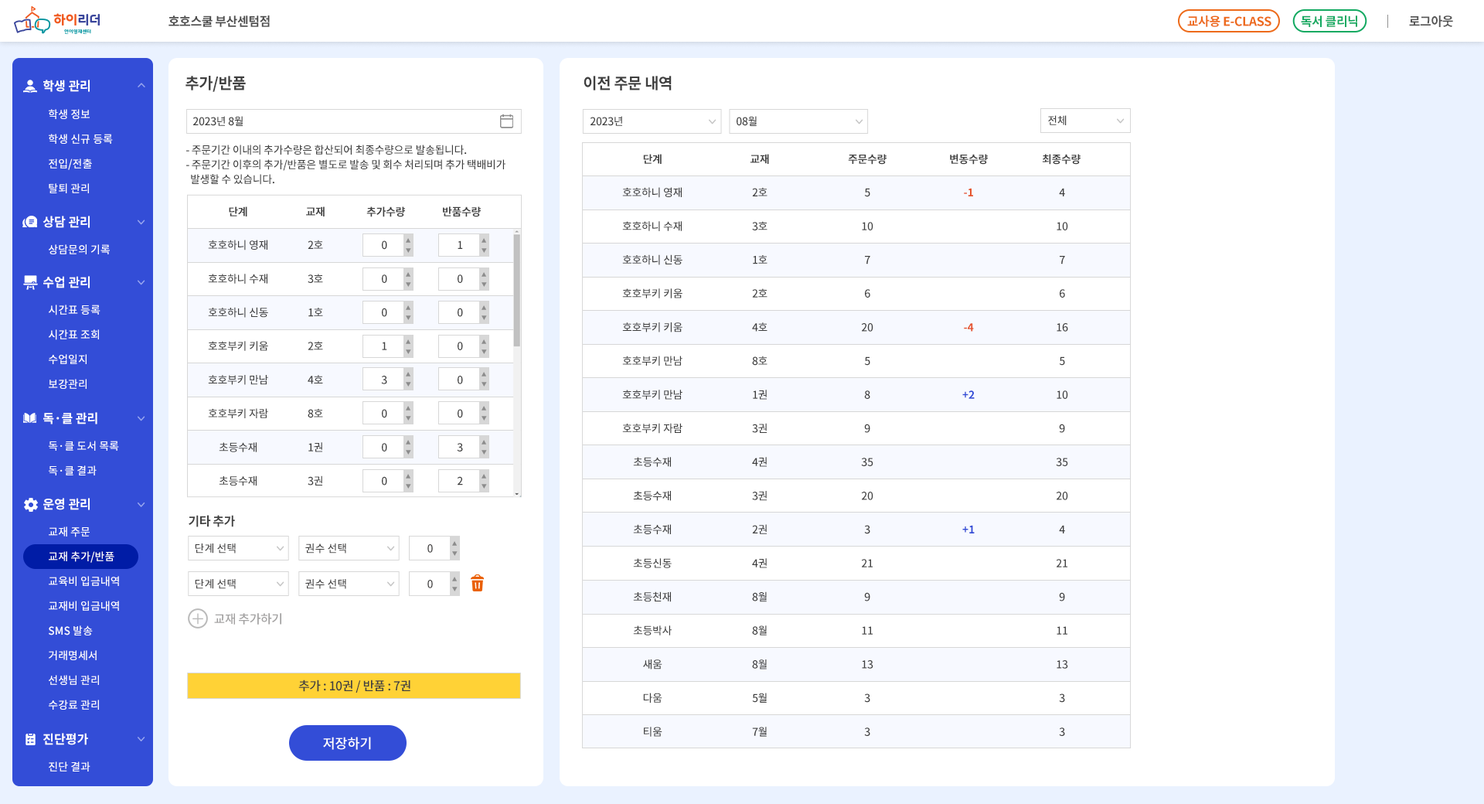
<style>
.page{position:relative;width:1484px;height:804px;background:#ffffff}
.page>*{position:absolute;margin:0}
.t1{font:12.4px "NotoSansCJKkr-Bold";letter-spacing:-0.025em;color:#4d4d4d}
.t2{font:12.4px "NotoSansCJKkr-Bold";letter-spacing:-0.025em;color:#ed6a1a}
.t3{font:12.4px "NotoSansCJKkr-Bold";letter-spacing:-0.025em;color:#13a961}
.t4{font:12.4px "NotoSansCJKkr-Bold";letter-spacing:-0.025em;color:#565656}
.t5{font:15.5px "NotoSansCJKkr-Bold";letter-spacing:-0.025em;color:#404040}
.t6{font:12.4px "NotoSansCJKkr-Bold";color:#ffffff}
.t7{font:10.8px/24.7px "NotoSansCJKkr-Medium";color:#ffffff}
.t8{font:10.8px "NotoSansCJKkr-Medium";letter-spacing:-0.025em;color:#404040}
.t9{font:10.8px/14.7px "NotoSansCJKkr-Medium";letter-spacing:-0.025em;color:#404040}
.t10{font:10.8px "NotoSansCJKkr-Bold";letter-spacing:-0.025em;color:#404040}
.t11{font:10.8px/33.7px "NotoSansCJKkr-Medium";letter-spacing:-0.025em;color:#404040}
.t12{font:10.8px/33.7px "NotoSansCJKkr-Bold";letter-spacing:-0.025em;color:#e5542d}
.t13{font:10.8px/33.7px "NotoSansCJKkr-Bold";letter-spacing:-0.025em;color:#334dd7}
.t14{font:10.8px "NotoSansCJKkr-Medium";color:#ffffff}
.t15{font:12.4px "NotoSansCJKkr-Bold";letter-spacing:-0.025em;color:#404040}
.t16{font:10.8px "NotoSansCJKkr-Medium";color:#414040}
.t17{font:12.4px "NotoSansCJKkr-Medium";letter-spacing:-0.025em;color:#a3a2a2}
.t18{font:12.4px "NotoSansCJKkr-Medium";letter-spacing:-0.025em;color:#404040}
.t19{font:13.5px "NotoSansCJKkr-Medium";color:#ffffff}
</style>
<div class="page">
<p class="t1" style="left:168px;top:15px;width:102px;height:12px">호호스쿨 부산센텀점</p>
<p class="t2" style="left:1187px;top:15px;width:84px;height:12px">교사용 E-CLASS</p>
<p class="t3" style="left:1301px;top:15px;width:56px;height:12px">독서 클리닉</p>
<p class="t4" style="left:1409px;top:15px;width:44px;height:12px">로그아웃</p>
<p class="t5" style="left:185px;top:76px;width:61px;height:16px">추가/반품</p>
<p class="t5" style="left:583px;top:76px;width:89px;height:14px">이전 주문 내역</p>
<p class="t6" style="left:43px;top:80px;width:47px;height:12px">학생 관리</p>
<p class="t7" style="left:49px;top:109px;width:64px;height:84px">학생 정보<br>학생 신규 등록<br>전입/전출<br>탈퇴 관리</p>
<p class="t8" style="left:192px;top:116px;width:51px;height:10px">2023년 8월</p>
<p class="t8" style="left:590px;top:116px;width:32px;height:10px">2023년</p>
<p class="t8" style="left:736px;top:116px;width:21px;height:10px">08월</p>
<p class="t8" style="left:1048px;top:115px;width:18px;height:10px">전체</p>
<p class="t9" style="left:186px;top:145px;width:319px;height:40px">- 주문기간 이내의 추가수량은 합산되어 최종수량으로 발송됩니다. <br>- 주문기간 이후의 추가/반품은 별도로 발송 및 회수 처리되며 추가 택배비가<br>  발생할 수 있습니다.</p>
<p class="t10" style="left:643px;top:154px;width:18px;height:10px">단계</p>
<p class="t10" style="left:750px;top:154px;width:19px;height:10px">교재</p>
<p class="t10" style="left:848px;top:154px;width:38px;height:11px">주문수량</p>
<p class="t10" style="left:950px;top:154px;width:38px;height:11px">변동수량</p>
<p class="t10" style="left:1042px;top:154px;width:38px;height:11px">최종수량</p>
<p class="t11" style="left:622px;top:187px;width:60px;height:549px;text-align:center">호호하니 영재<br>호호하니 수재<br>호호하니 신동<br>호호부키 키움<br>호호부키 키움<br>호호부키 만남<br>호호부키 만남<br>호호부키 자람<br>초등수재<br>초등수재<br>초등수재<br>초등신동<br>초등천재<br>초등박사<br>새움<br>다움<br>티움</p>
<p class="t11" style="left:752px;top:187px;width:15px;height:549px;text-align:center">2호<br>3호<br>1호<br>2호<br>4호<br>8호<br>1권<br>3권<br>4권<br>3권<br>2권<br>4권<br>8월<br>8월<br>8월<br>5월<br>7월</p>
<p class="t11" style="left:861px;top:188px;width:12px;height:548px;text-align:center">5<br>10<br>7<br>6<br>20<br>5<br>8<br>9<br>35<br>20<br>3<br>21<br>9<br>11<br>13<br>3<br>3</p>
<p class="t12" style="left:962px;top:188px;width:12px;height:345px;text-align:center">-1<br><br><br><br>-4<br><br><span class="t13">+2<br><br><br><br>+1</span></p>
<p class="t11" style="left:1056px;top:188px;width:12px;height:548px;text-align:center">4<br>10<br>7<br>6<br>16<br>5<br>10<br>9<br>35<br>20<br>4<br>21<br>9<br>11<br>13<br>3<br>3</p>
<p class="t10" style="left:229px;top:206px;width:18px;height:10px">단계</p>
<p class="t10" style="left:306px;top:206px;width:19px;height:10px">교재</p>
<p class="t10" style="left:366px;top:206px;width:39px;height:11px">추가수량</p>
<p class="t10" style="left:443px;top:206px;width:38px;height:11px">반품수량</p>
<p class="t6" style="left:43px;top:216px;width:47px;height:12px">상담 관리</p>
<p class="t14" style="left:49px;top:244px;width:61px;height:10px">상담문의 기록</p>
<p class="t11" style="left:208px;top:240px;width:60px;height:246px;text-align:center">호호하니 영재<br>호호하니 수재<br>호호하니 신동<br>호호부키 키움<br>호호부키 만남<br>호호부키 자람<br>초등수재<br>초등수재</p>
<p class="t11" style="left:308px;top:240px;width:15px;height:245px;text-align:center">2호<br>3호<br>1호<br>2호<br>4호<br>8호<br>1권<br>3권</p>
<p class="t11" style="left:381px;top:240px;width:6px;height:245px;text-align:center">0<br>0<br>0<br>1<br>3<br>0<br>0<br>0</p>
<p class="t11" style="left:457px;top:240px;width:6px;height:245px;text-align:center">1<br>0<br>0<br>0<br>0<br>0<br>3<br>2</p>
<p class="t6" style="left:43px;top:276px;width:47px;height:12px">수업 관리</p>
<p class="t7" style="left:49px;top:304px;width:51px;height:85px">시간표 등록<br>시간표 조회<br>수업일지<br>보강관리</p>
<p class="t6" style="left:43px;top:412px;width:54px;height:12px">독·클 관리</p>
<p class="t7" style="left:49px;top:440px;width:70px;height:35px">독·클 도서 목록<br>독·클 결과</p>
<p class="t6" style="left:43px;top:498px;width:47px;height:12px">운영 관리</p>
<p class="t15" style="left:189px;top:515px;width:46px;height:12px">기타 추가</p>
<p class="t7" style="left:49px;top:526px;width:70px;height:183px">교재 주문<br>교재 추가/반품<br>교육비 입금내역<br>교재비 입금내역<br>SMS 발송<br>거래명세서<br>선생님 관리<br>수강료 관리</p>
<p class="t16" style="left:195px;top:543px;width:41px;height:10px">단계 선택</p>
<p class="t16" style="left:305px;top:543px;width:41px;height:10px">권수 선택</p>
<p class="t16" style="left:427px;top:544px;width:6px;height:9px">0</p>
<p class="t16" style="left:195px;top:579px;width:41px;height:10px">단계 선택</p>
<p class="t16" style="left:305px;top:579px;width:41px;height:10px">권수 선택</p>
<p class="t16" style="left:427px;top:580px;width:6px;height:8px">0</p>
<p class="t17" style="left:214px;top:613px;width:67px;height:11px">교재 추가하기</p>
<p class="t18" style="left:298px;top:679px;width:112px;height:13px">추가 : 10권 / 반품 : 7권</p>
<p class="t6" style="left:43px;top:733px;width:45px;height:12px">진단평가</p>
<p class="t19" style="left:323px;top:736px;width:48px;height:14px">저장하기</p>
<p class="t14" style="left:49px;top:761px;width:41px;height:10px">진단 결과</p>
</div>
